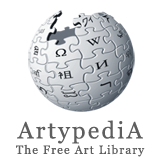
<style>
.page{position:relative;width:160px;height:160px;background:#ffffff}
.page>*{position:absolute;margin:0}
.t1{font:11.7px/15.4px "Georgia";letter-spacing:0.1em;color:#5e5e5e}
.t2{font:23.5px/15.4px "Georgia";letter-spacing:0.1em;color:#5e5e5e}
</style>
<div class="page">
<p class="t1" style="left:16px;top:120px;width:129px;height:37px;text-align:center"><span class="t2">ArtypediA<br></span>The Free Art Library</p>
</div>
